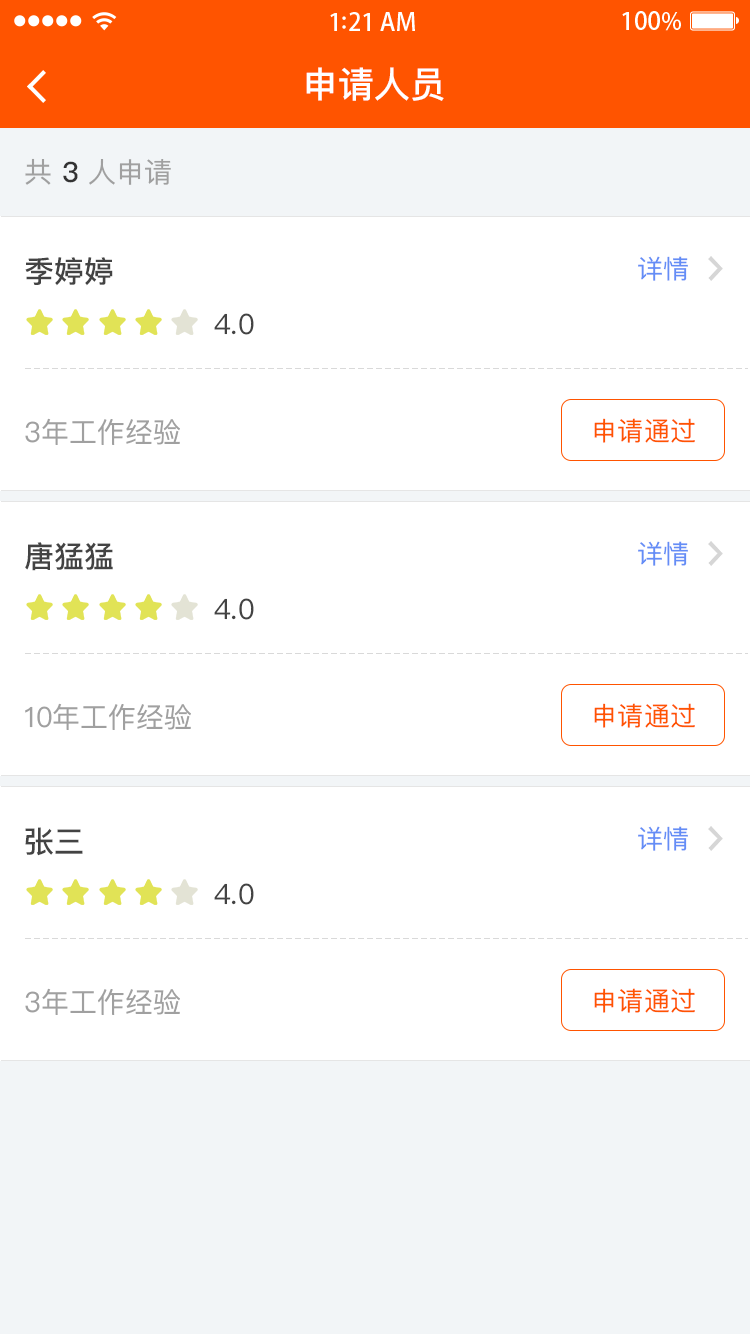
<style>
.page{position:relative;width:750px;height:1334px;background:#ffffff}
.page>*{position:absolute;margin:0}
.t1{font:36px "PingFangSC-Medium";color:#ffffff}
.t2{font:28px "PingFangSC-Regular";color:#a0a0a0}
.t3{font:28px "PingFangSC-Medium";color:#333333}
.t4{font:30px "PingFangSC-Medium";color:#434343}
.t5{font:26px "PingFangSC-Regular";color:#648df6}
.t6{font:28px "PingFangSC-Regular";color:#434343}
.t7{font:26px "PingFangSC-Regular";letter-spacing:0.02em;color:#ff5400}
</style>
<div class="page">
<p class="t1" style="left:306px;top:67px;width:138px;height:34px">申请人员</p>
<p class="t2" style="left:25px;top:158px;width:146px;height:27px">共 <span class="t3">3</span> 人申请</p>
<p class="t4" style="left:25px;top:257px;width:88px;height:29px">季婷婷</p>
<p class="t5" style="left:638px;top:256px;width:50px;height:25px">详情</p>
<p class="t6" style="left:214px;top:313px;width:40px;height:22px">4.0</p>
<p class="t2" style="left:25px;top:418px;width:155px;height:27px">3年工作经验</p>
<p class="t7" style="left:594px;top:418px;width:101px;height:25px">申请通过</p>
<p class="t4" style="left:25px;top:542px;width:88px;height:29px">唐猛猛</p>
<p class="t5" style="left:638px;top:541px;width:50px;height:25px">详情</p>
<p class="t6" style="left:214px;top:598px;width:40px;height:22px">4.0</p>
<p class="t2" style="left:25px;top:703px;width:166px;height:27px">10年工作经验</p>
<p class="t7" style="left:594px;top:703px;width:101px;height:25px">申请通过</p>
<p class="t4" style="left:25px;top:827px;width:58px;height:29px">张三</p>
<p class="t5" style="left:638px;top:826px;width:50px;height:25px">详情</p>
<p class="t6" style="left:214px;top:883px;width:40px;height:22px">4.0</p>
<p class="t2" style="left:25px;top:988px;width:155px;height:27px">3年工作经验</p>
<p class="t7" style="left:594px;top:988px;width:101px;height:25px">申请通过</p>
</div>
